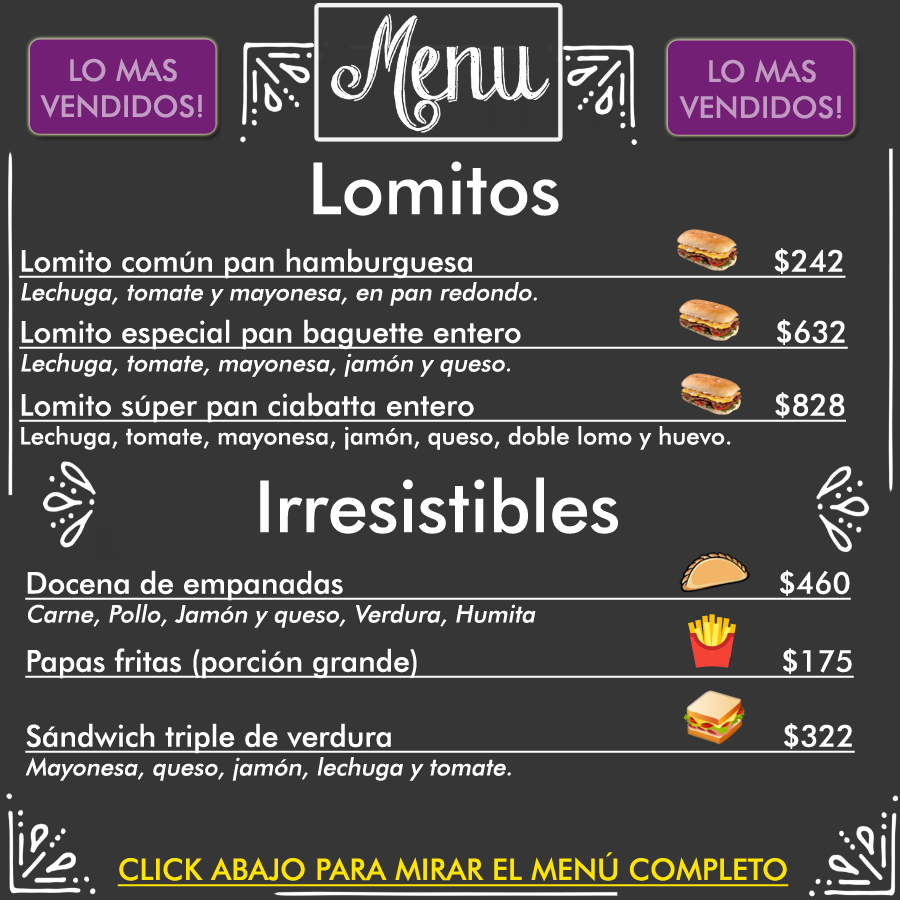
<style>
.page{position:relative;width:900px;height:900px;background:#363636}
.page>*{position:absolute;margin:0}
.t1{font:30px "FuturaBT-Medium";color:#c29dc3;text-transform:uppercase}
.t2{font:30px "FuturaBT-Medium";color:#c09ac1;text-transform:uppercase}
.t3{font:72px "FuturaBT-Medium";color:#ffffff}
.t4{font:30px "FuturaBT-Medium";color:#ffffff;text-decoration:underline}
.t5{font:24px "FuturaBT-Medium";color:#ffffff;font-style:italic}
.t6{font:24px "FuturaBT-Medium";color:#ffffff}
.t7{font:30px "FuturaBT-Medium";color:#ffe400;text-transform:uppercase;text-decoration:underline}
</style>
<div class="page">
<p class="t1" style="left:40px;top:58px;width:162px;height:60px;text-align:center">Lo mas<br>vendidos!</p>
<p class="t2" style="left:679px;top:59px;width:162px;height:60px;text-align:center">Lo mas<br>vendidos!</p>
<p class="t3" style="left:313px;top:161px;width:246px;height:55px">Lomitos</p>
<p class="t4" style="left:19px;top:248px;width:827px;height:58px">Lomito común pan hamburguesa                                 $242<br><span class="t5">Lechuga, tomate y mayonesa, en pan redondo.</span></p>
<p class="t4" style="left:19px;top:319px;width:829px;height:58px">Lomito especial pan baguette entero                            $632<br><span class="t5">Lechuga, tomate, mayonesa, jamón y queso.</span></p>
<p class="t4" style="left:19px;top:392px;width:827px;height:58px">Lomito súper pan ciabatta entero                                 $828<br><span class="t6">Lechuga, tomate, mayonesa, jamón, queso, doble lomo y huevo.</span></p>
<p class="t3" style="left:260px;top:477px;width:358px;height:57px">Irresistibles</p>
<p class="t4" style="left:25px;top:570px;width:826px;height:58px">Docena de empanadas                                                $460<br><span class="t5">Carne, Pollo, Jamón y queso, Verdura, Humita</span></p>
<p class="t4" style="left:25px;top:648px;width:829px;height:31px">Papas fritas (porción grande)                                        $175</p>
<p class="t4" style="left:25px;top:723px;width:830px;height:58px">Sándwich triple de verdura                                           $322<br><span class="t5">Mayonesa, queso, jamón, lechuga y tomate.</span></p>
<p class="t7" style="left:117px;top:852px;width:672px;height:35px">click abajo para mirar el menú completo</p>
</div>
